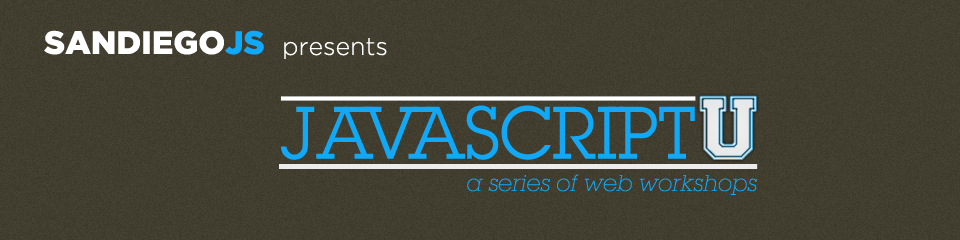
<style>
.page{position:relative;width:960px;height:240px}
.page>*{position:absolute;margin:0}
.t1{font:32.4px "GothamBlack";color:#ffffff}
.t2{font:32.4px "GothamBlack";color:#11a9f7}
.t3{font:25px "GothamLight";color:#ffffff}
.t4{font:74.2px "Collegiate-Norm";color:#e1e1e1;font-weight:bold}
.t5{font:72.3px "LubalinGraphStd-Book";color:#11a9f7;scale:0.97 1}
.t6{font:22.4px "LubalinGraphITCbyBT-XtraLightOb";color:#11a9f7}
</style>
<div class="page">
<p class="t1" style="left:44px;top:30px;width:220px;height:25px">SANDIEGO<span class="t2">JS</span></p>
<p class="t3" style="left:284px;top:38px;width:103px;height:21px">presents</p>
<p class="t4" style="left:699px;top:95px;width:58px;height:65px">U</p>
<p class="t5" style="left:281px;top:105px;width:414px;height:55px">JAVASCRIPT</p>
<p class="t6" style="left:467px;top:174px;width:290px;height:21px">a series of web workshops</p>
</div>
